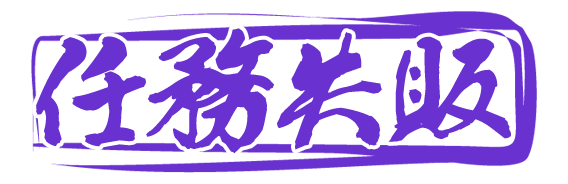
<style>
.page{position:relative;width:568px;height:184px;background:#ffffff}
.page>*{position:absolute;margin:0}
.t1{font:120px "AB_ootori";color:#6931d0}
</style>
<div class="page">
<p class="t1" style="left:36px;top:28px;width:475px;height:126px">任務失敗</p>
</div>
